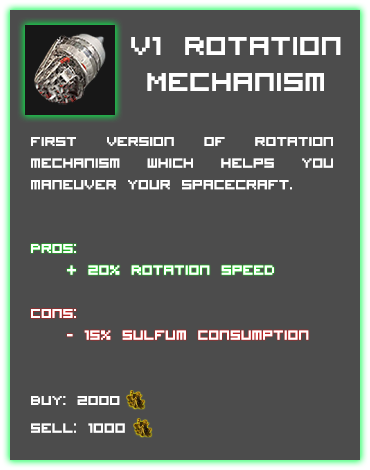
<style>
.page{position:relative;width:370px;height:470px;background:#4c4c4c}
.page>*{position:absolute;margin:0}
.t1{font:36px/12px "VisitorTT1BRK";color:#ffffff}
.t2{font:18px "VisitorTT1BRK";color:#ffffff}
</style>
<div class="page">
<p class="t1" style="left:131px;top:37px;width:210px;height:54px;text-align:center">V1 Rotation <br><br><br>Mechanism</p>
<p class="t2" style="left:31px;top:137px;width:302px;height:53px;text-align:justify">First version of rotation mechanism which Helps you maneuver your spacecraft.</p>
<p class="t2" style="left:31px;top:244px;width:243px;height:31px;text-align:justify">Pros:<br> + 20% Rotation speed</p>
<p class="t2" style="left:31px;top:309px;width:278px;height:31px;text-align:justify">Cons:<br> - 15% sulfum consumption</p>
<p class="t2" style="left:31px;top:396px;width:94px;height:37px">Buy: 2000 <br><br>Sell: 1000</p>
</div>
